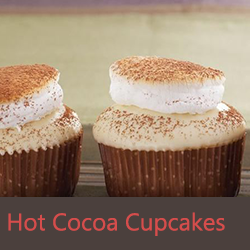
<style>
.page{position:relative;width:250px;height:250px}
.page>*{position:absolute;margin:0}
.t1{font:24px "MicrosoftTaiLe";color:#d64d4c}
</style>
<div class="page">
<p class="t1" style="left:8px;top:212px;width:217px;height:24px">Hot Cocoa Cupcakes</p>
</div>
